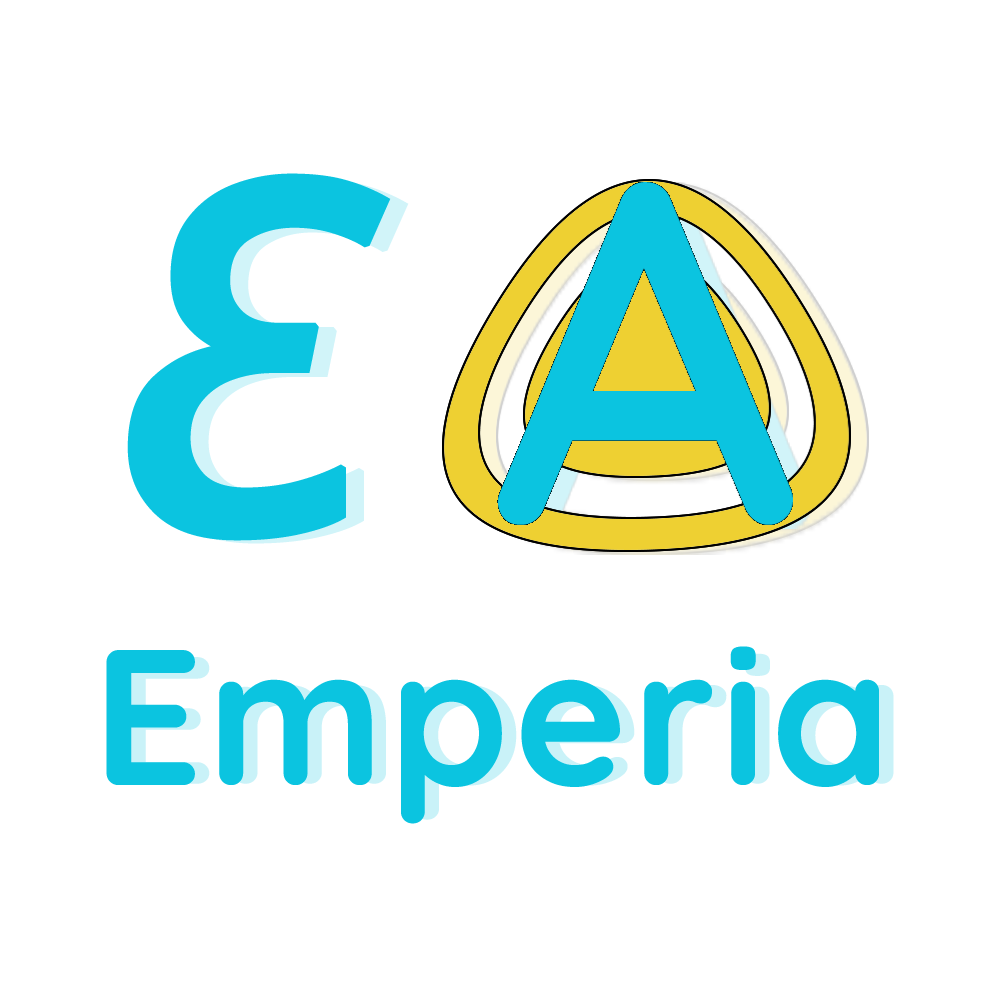
<style>
.page{position:relative;width:1000px;height:1000px;background:#ffffff}
.page>*{position:absolute;margin:0}
.t1{font:648.6px "NotoSans-Italic";color:#0bc4e0;font-weight:bold;scale:0.97 1}
.t2{font:645.1px "NotoSans-Italic";color:#0bc4e0;font-weight:bold}
.t3{font:191.7px "Quicksand-Bold";color:#0bc4e0;font-weight:bold}
.t4{font:179.7px "Quicksand-Bold";font-weight:bold;scale:1.07 1}
</style>
<div class="page">
<p class="t1" style="left:127px;top:173px;width:264px;height:368px">ε</p>
<p class="t2" style="left:145px;top:178px;width:264px;height:366px;opacity:0.19">ε</p>
<p class="t3" style="left:106px;top:646px;width:773px;height:178px">Emperia</p>
<p class="t4" style="left:121px;top:653px;width:773px;height:167px">Emperia</p>
</div>
